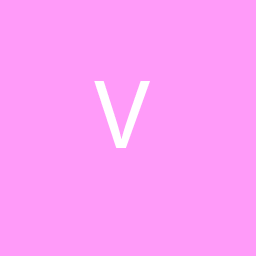
<style>
.page{position:relative;width:256px;height:256px;background:#ff9bf9}
.page>*{position:absolute;margin:0}
.t1{font:100px "MyriadPro-Regular";color:#ffffff}
</style>
<div class="page">
<p class="t1" style="left:94px;top:81px;width:56px;height:67px">V</p>
</div>
